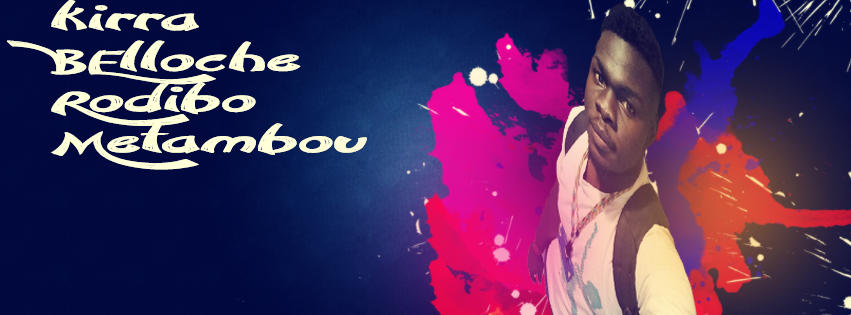
<style>
.page{position:relative;width:851px;height:315px}
.page>*{position:absolute;margin:0}
.t1{font:34px "Confetti-Stream";color:#ffffda;scale:2.4 1}
</style>
<div class="page">
<p class="t1" style="left:7px;top:0px;width:360px;height:170px">kirra<br>BElloche<br>Rodibo<br>Metambou</p>
</div>
